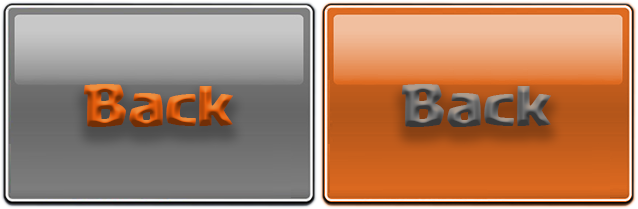
<style>
.page{position:relative;width:638px;height:209px}
.page>*{position:absolute;margin:0}
.t1{font:44.2px "Supercell-Magic"}
</style>
<div class="page">
<p class="t1" style="left:84px;top:84px;width:149px;height:43px">Back</p>
<p class="t1" style="left:402px;top:84px;width:149px;height:43px">Back</p>
</div>
